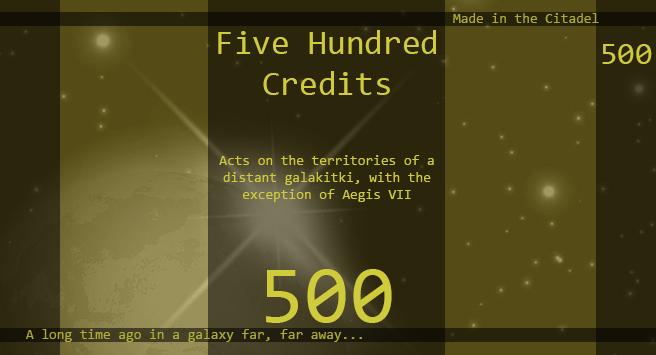
<style>
.page{position:relative;width:656px;height:355px;background:#2a250b}
.page>*{position:absolute;margin:0}
.t1{font:14px "Consolas";color:#afaa31}
.t2{font:34px "Consolas";color:#d0cb3b}
.t3{font:32px "Consolas";color:#d0cb3b}
.t4{font:14px "Consolas";color:#d0cb3b}
.t5{font:82px "Consolas";color:#d0cb3b}
.t6{font:14px "Consolas";color:#aeaa32}
</style>
<div class="page">
<p class="t1" style="left:453px;top:13px;width:146px;height:10px">Made in the Citadel</p>
<p class="t2" style="left:218px;top:30px;width:218px;height:65px;text-align:center">Five Hundred<br>Credits</p>
<p class="t3" style="left:602px;top:44px;width:50px;height:20px">500</p>
<p class="t4" style="left:219px;top:155px;width:215px;height:47px;text-align:center">Acts on the territories of a distant galakitki, with the exception of Aegis VII</p>
<p class="t5" style="left:266px;top:269px;width:126px;height:54px">500</p>
<p class="t6" style="left:26px;top:329px;width:336px;height:13px">A long time ago in a galaxy far, far away...</p>
</div>
